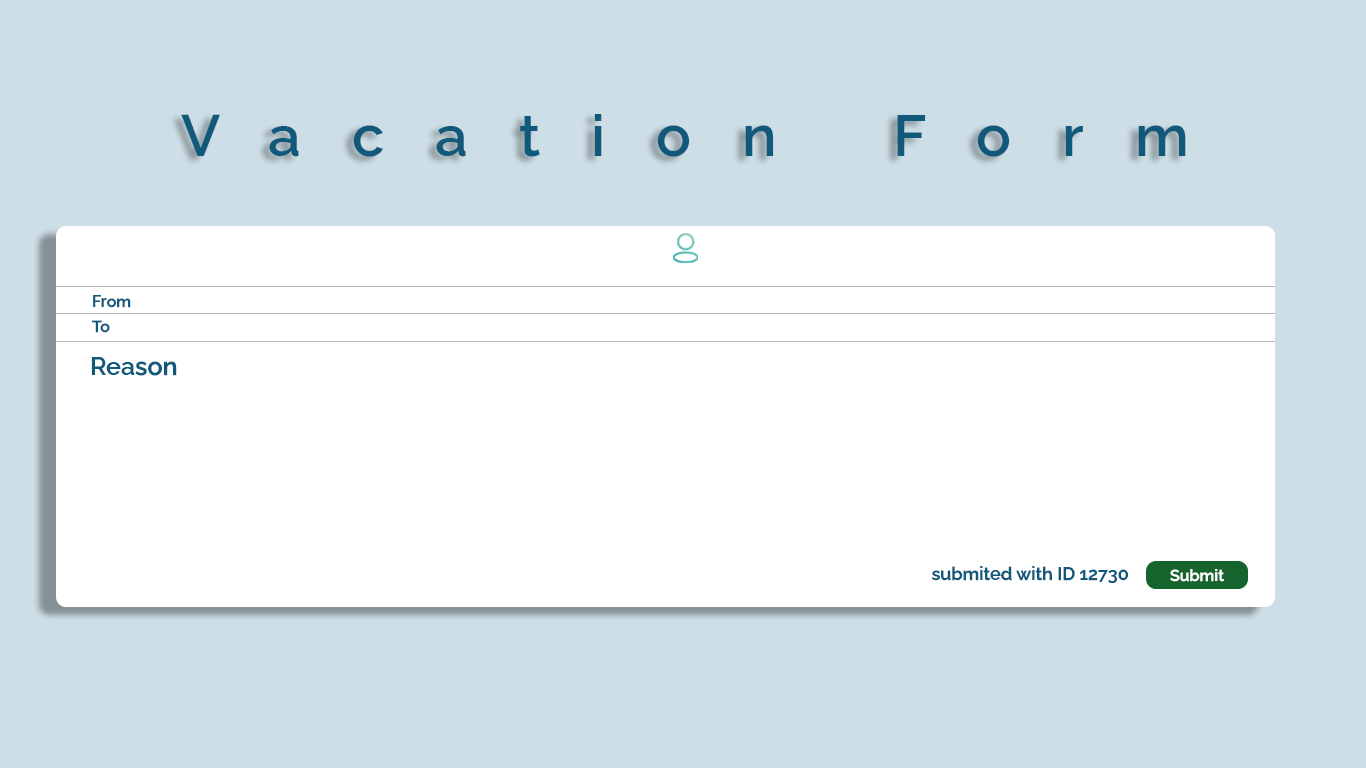
<style>
.page{position:relative;width:1366px;height:768px;background:#cddee6}
.page>*{position:absolute;margin:0}
.t1{font:58px "RalewayRoman-SemiBold";letter-spacing:0.88em;color:#10597b}
.t2{font:16px "RalewayRoman-SemiBold";color:#10597b}
.t3{font:25px "RalewayRoman-SemiBold";color:#10597b}
.t4{font:18px "RalewayRoman-SemiBold";color:#10597b}
.t5{font:16px "RalewayRoman-SemiBold";color:#ffffff}
</style>
<div class="page">
<p class="t1" style="left:181px;top:114px;width:1005px;height:43px">Vacation Form</p>
<p class="t2" style="left:93px;top:295px;width:38px;height:13px">From</p>
<p class="t2" style="left:92px;top:320px;width:18px;height:13px">To</p>
<p class="t3" style="left:91px;top:357px;width:86px;height:19px">Reason</p>
<p class="t4" style="left:931px;top:566px;width:198px;height:17px">submited with ID 12730</p>
<p class="t5" style="left:1170px;top:569px;width:55px;height:13px">Submit</p>
</div>
